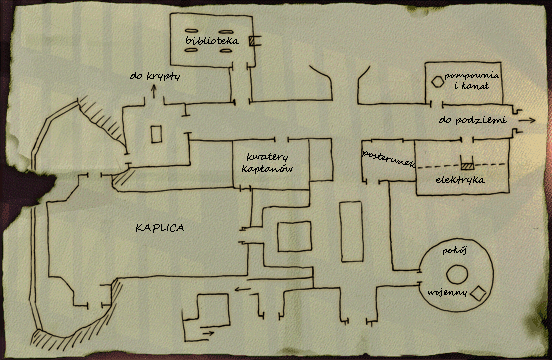
<style>
.page{position:relative;width:552px;height:360px}
.page>*{position:absolute;margin:0}
.t1{font:10px "SegoeScript";color:#000000}
.t2{font:9px "SegoeScript";color:#000000}
</style>
<div class="page">
<p class="t1" style="left:186px;top:36px;width:53px;height:9px">biblioteka</p>
<p class="t1" style="left:130px;top:72px;width:50px;height:9px">do krypty</p>
<p class="t2" style="left:445px;top:71px;width:54px;height:19px;text-align:center">pompownia i kanał</p>
<p class="t1" style="left:242px;top:153px;width:51px;height:21px;text-align:center">kwatery<br>kapłanów</p>
<p class="t2" style="left:362px;top:151px;width:54px;height:17px;rotate:14deg">posterunek</p>
<p class="t1" style="left:436px;top:176px;width:49px;height:9px">elektryka</p>
<p class="t1" style="left:136px;top:224px;width:48px;height:9px">KAPLICA</p>
<p class="t2" style="left:443px;top:246px;width:24px;height:9px">pokój</p>
<p class="t2" style="left:428px;top:288px;width:39px;height:9px">wojenny</p>
</div>
